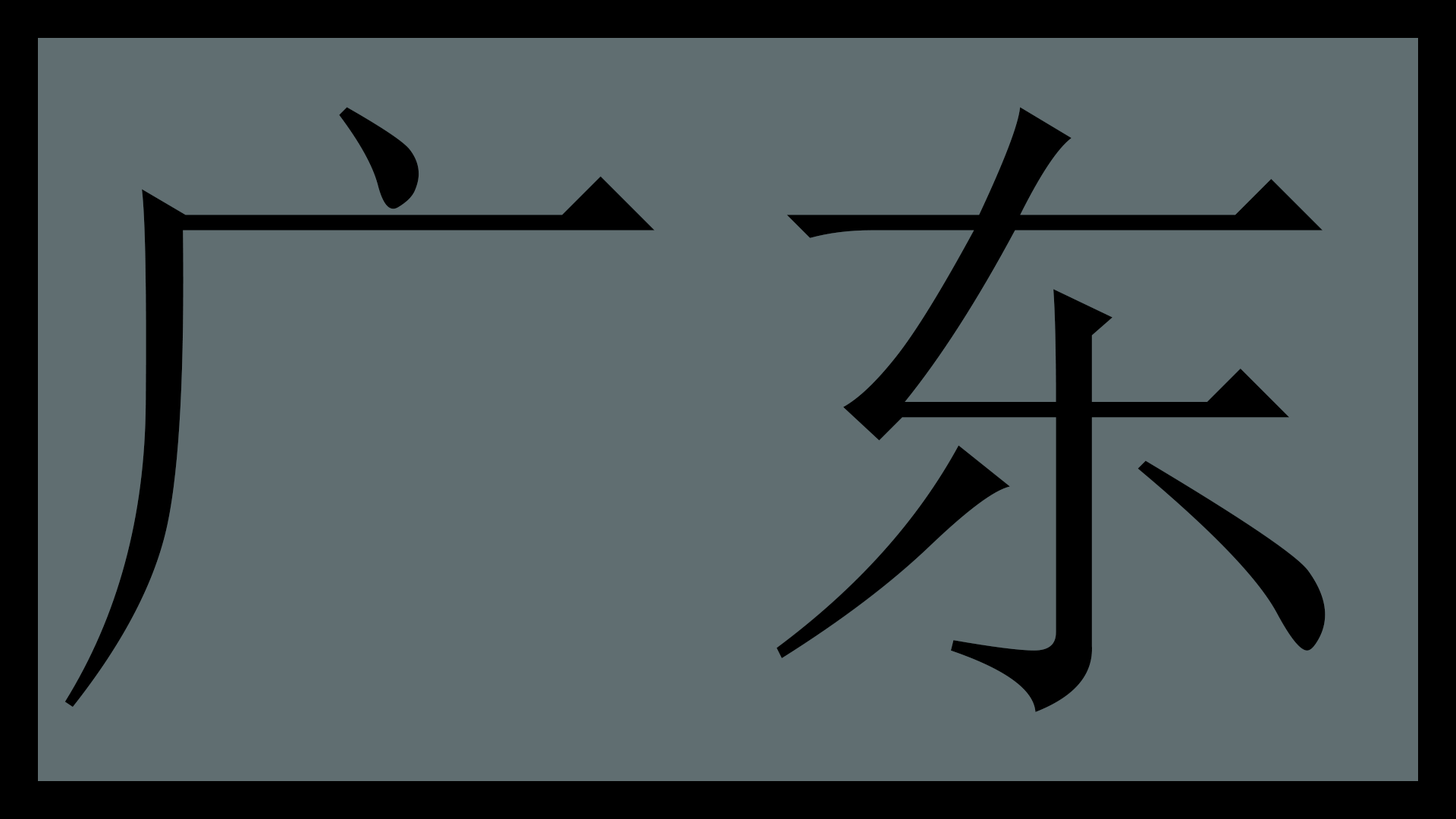
<style>
.page{position:relative;width:1456px;height:819px;background:#606e71}
.page>*{position:absolute;margin:0}
.t1{font:655.8px "SimSun";letter-spacing:0.05em;color:#000000}
</style>
<div class="page">
<p class="t1" style="left:64px;top:107px;width:1262px;height:605px">广东</p>
</div>
